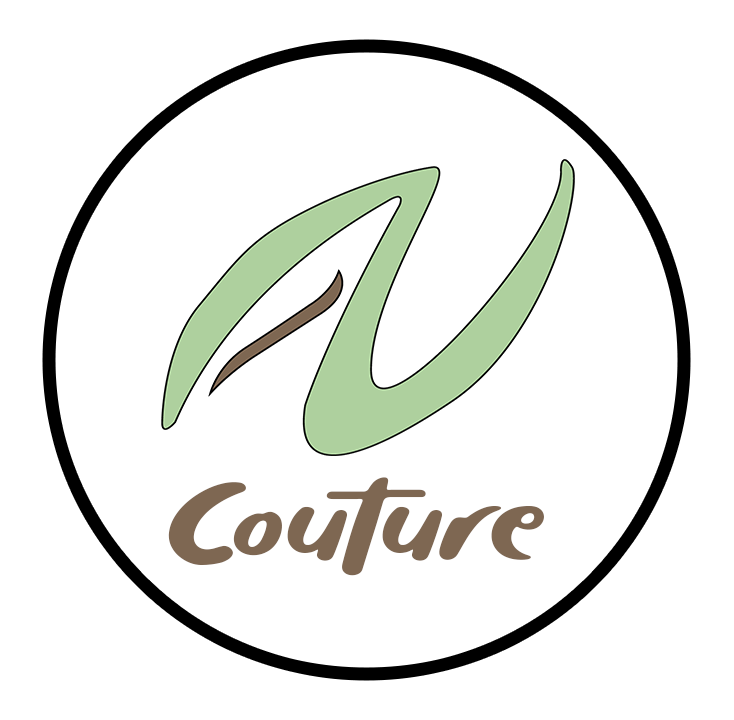
<style>
.page{position:relative;width:734px;height:720px;background:#ffffff}
.page>*{position:absolute;margin:0}
.t1{font:126px "FunkyMonkey";color:#7e6752;scale:1.34 1}
</style>
<div class="page">
<p class="t1" style="left:168px;top:477px;width:376px;height:99px">Couture</p>
</div>
